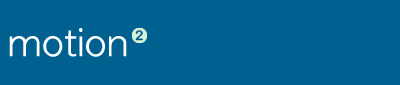
<style>
.page{position:relative;width:400px;height:85px;background:#006191}
.page>*{position:absolute;margin:0}
.t1{font:37px "AppleGothic";letter-spacing:0.025em;color:#ffffff}
</style>
<div class="page">
<p class="t1" style="left:9px;top:28px;width:118px;height:29px">motion</p>
</div>
